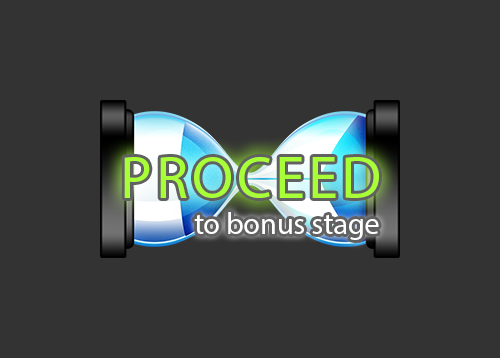
<style>
.page{position:relative;width:500px;height:358px;background:#333333}
.page>*{position:absolute;margin:0}
.t1{font:60px "MyriadPro-Regular";letter-spacing:0.06em;color:#a8ff37}
.t2{font:30px "MyriadPro-Regular";color:#ffffff}
</style>
<div class="page">
<p class="t1" style="left:124px;top:157px;width:255px;height:41px">PROCEED</p>
<p class="t2" style="left:194px;top:212px;width:185px;height:28px">to bonus stage</p>
</div>
